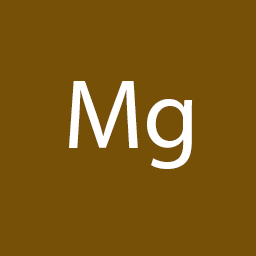
<style>
.page{position:relative;width:256px;height:256px;background:#765007}
.page>*{position:absolute;margin:0}
.t1{font:100px "MyriadPro-Regular";color:#ffffff}
</style>
<div class="page">
<p class="t1" style="left:69px;top:81px;width:124px;height:88px">Mg</p>
</div>
